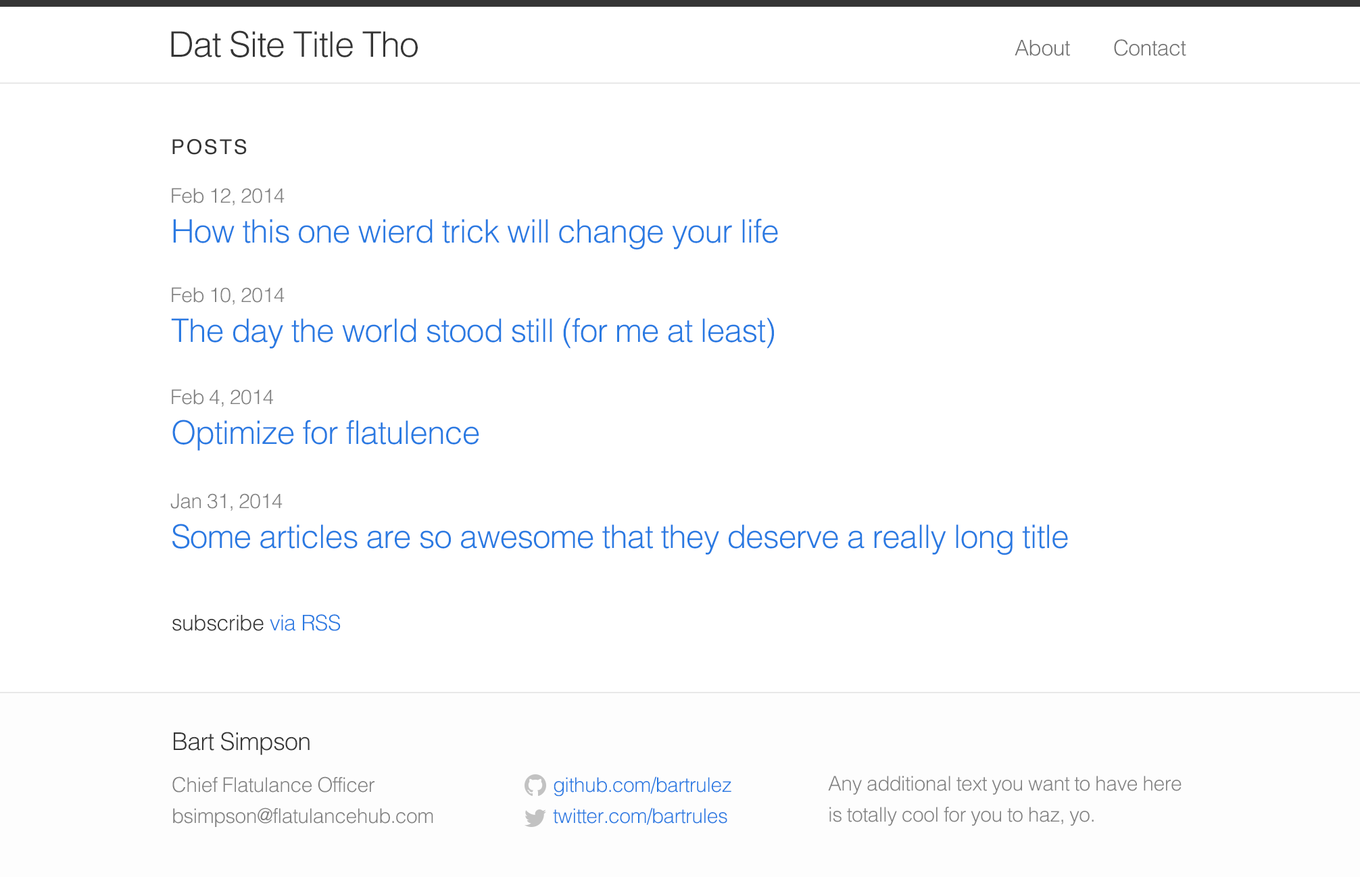
<style>
.page{position:relative;width:1360px;height:877px;background:#ffffff}
.page>*{position:absolute;margin:0}
.t1{font:35.1px "Helvetica-Light";letter-spacing:-0.025em;color:#353535}
.t2{font:21.6px "Helvetica-Light";letter-spacing:-0.025em;color:#727272}
.t3{font:20.3px "Helvetica";letter-spacing:0.1em;color:#353535;text-transform:uppercase}
.t4{font:20.3px "Helvetica-Light";letter-spacing:-0.025em;color:#818181}
.t5{font:32.4px "Helvetica-Light";letter-spacing:-0.025em;color:#2a7ae2}
.t6{font:21.6px "Helvetica-Light";letter-spacing:-0.025em;color:#333333}
.t7{font:21.6px "Helvetica-Light";letter-spacing:-0.025em;color:#2a7ae2}
.t8{font:24.3px "Helvetica-Light";letter-spacing:-0.025em;color:#353535}
.t9{font:20.3px "Helvetica-Light";letter-spacing:-0.025em;color:#828282}
.t10{font:20.3px "Helvetica-Light";letter-spacing:-0.025em;color:#2a7ae2}
.t11{font:20.3px/31.1px "Helvetica-Light";letter-spacing:-0.025em;color:#828282}
</style>
<div class="page">
<p class="t1" style="left:171px;top:30px;width:247px;height:27px">Dat Site Title Tho</p>
<p class="t2" style="left:1014px;top:40px;width:56px;height:16px">About</p>
<p class="t2" style="left:1114px;top:39px;width:72px;height:17px">Contact</p>
<p class="t3" style="left:172px;top:139px;width:75px;height:16px">posts</p>
<p class="t4" style="left:172px;top:188px;width:112px;height:17px">Feb 12, 2014</p>
<p class="t5" style="left:173px;top:218px;width:605px;height:32px">How this one wierd trick will change your life</p>
<p class="t4" style="left:172px;top:287px;width:112px;height:18px">Feb 10, 2014</p>
<p class="t5" style="left:171px;top:318px;width:603px;height:31px">The day the world stood still (for me at least)</p>
<p class="t4" style="left:172px;top:389px;width:101px;height:18px">Feb 4, 2014</p>
<p class="t5" style="left:172px;top:420px;width:307px;height:31px">Optimize for flatulence</p>
<p class="t4" style="left:170px;top:493px;width:112px;height:18px">Jan 31, 2014</p>
<p class="t5" style="left:172px;top:524px;width:896px;height:31px">Some articles are so awesome that they deserve a really long title</p>
<p class="t6" style="left:172px;top:614px;width:169px;height:17px">subscribe <span class="t7">via RSS</span></p>
<p class="t8" style="left:174px;top:732px;width:135px;height:23px">Bart Simpson</p>
<p class="t9" style="left:172px;top:776px;width:202px;height:17px">Chief Flatulance Officer</p>
<p class="t10" style="left:553px;top:776px;width:178px;height:21px">github.com/bartrulez</p>
<p class="t11" style="left:828px;top:776px;width:353px;height:50px">Any additional text you want to have here<br>is totally cool for you to haz, yo.</p>
<p class="t9" style="left:173px;top:807px;width:260px;height:20px">bsimpson@flatulancehub.com</p>
<p class="t10" style="left:553px;top:807px;width:174px;height:18px">twitter.com/bartrules</p>
</div>
